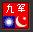
<style>
.page{position:relative;width:33px;height:32px;background:#f20000}
.page>*{position:absolute;margin:0}
.t1{font:10.4px "SimSun";color:#ffffff}
</style>
<div class="page">
<p class="t1" style="left:6px;top:4px;width:19px;height:9px">九军</p>
</div>
